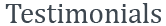
<style>
.page{position:relative;width:166px;height:26px;background:#ffffff}
.page>*{position:absolute;margin:0}
.t1{font:29px "Cambria";color:#3d464f}
</style>
<div class="page">
<p class="t1" style="left:5px;top:3px;width:156px;height:20px">Testimonials</p>
</div>
